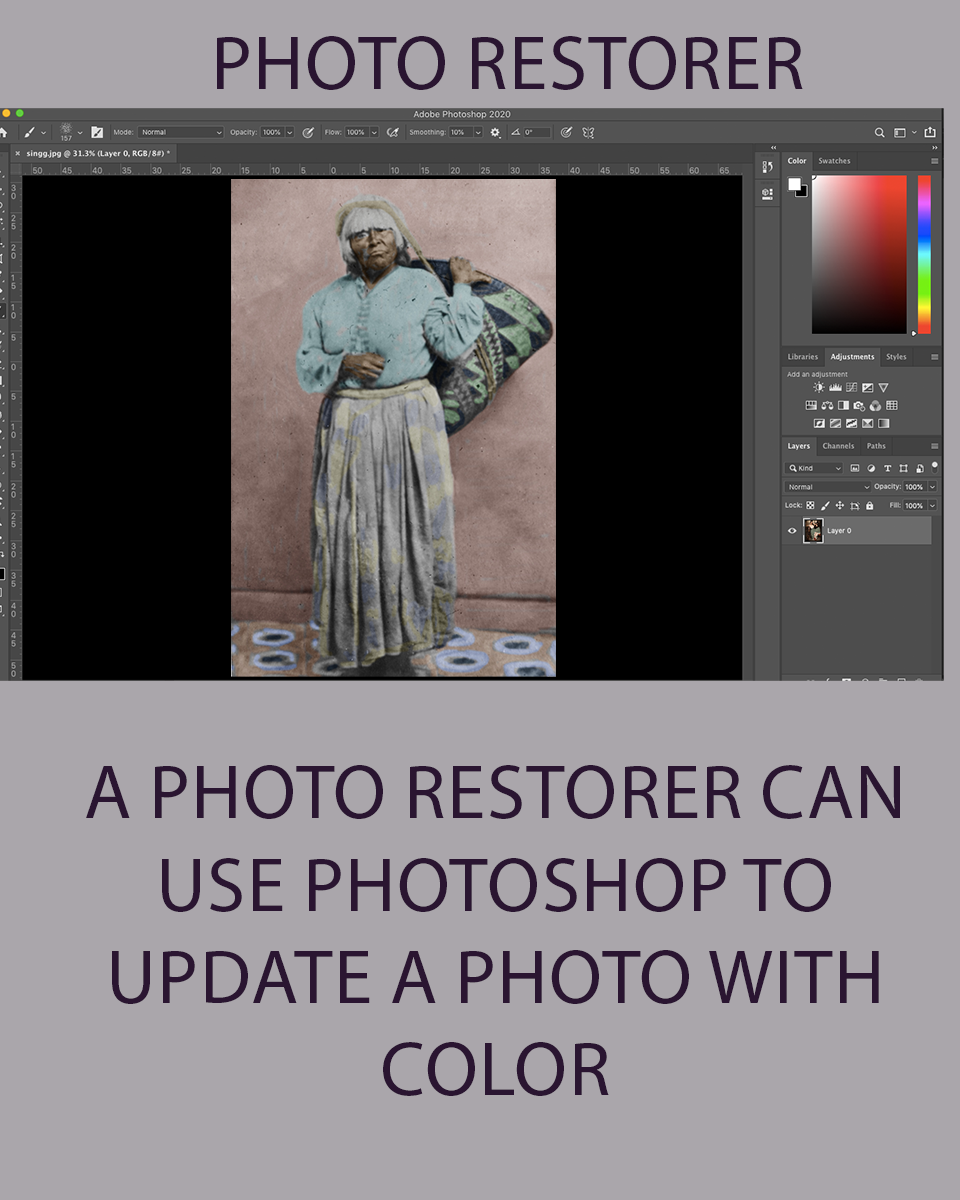
<style>
.page{position:relative;width:960px;height:1200px;background:#aaa6ab}
.page>*{position:absolute;margin:0}
.t1{font:77px "MyriadPro-Regular";color:#2a1531;text-transform:uppercase}
</style>
<div class="page">
<p class="t1" style="left:217px;top:36px;width:586px;height:54px">Photo restorer</p>
<p class="t1" style="left:86px;top:765px;width:814px;height:331px;text-align:center">a photo restorer can use photoshop to update a photo with color</p>
</div>
